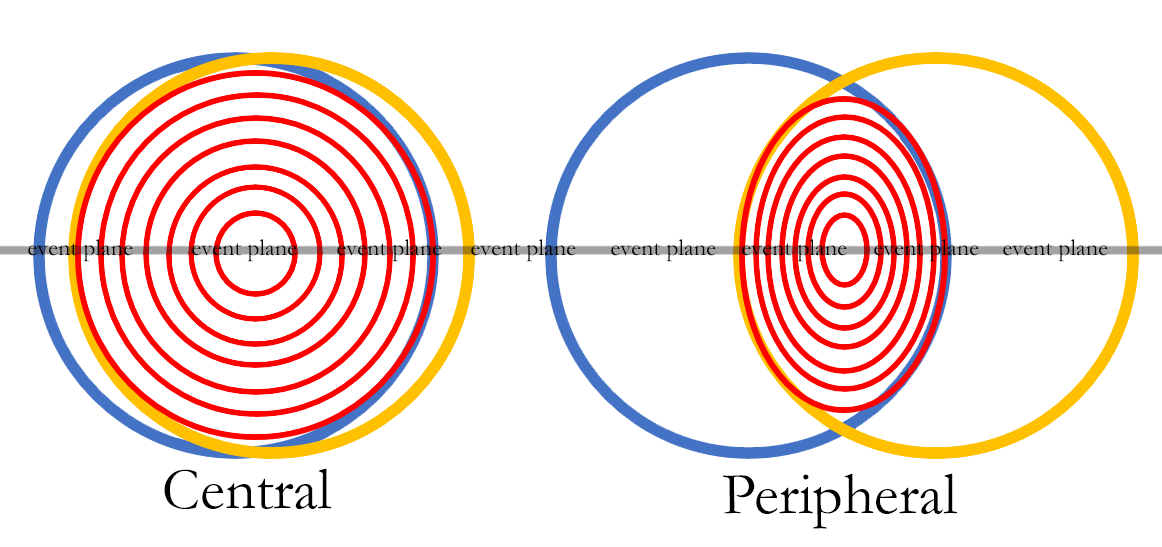
<style>
.page{position:relative;width:1162px;height:547px;background:#ffffff}
.page>*{position:absolute;margin:0}
.t1{font:24px "Garamond";color:#000000}
.t2{font:60px "Garamond";color:#000000}
</style>
<div class="page">
<p class="t1" style="left:28px;top:239px;width:105px;height:23px">event plane</p>
<p class="t1" style="left:192px;top:239px;width:105px;height:23px">event plane</p>
<p class="t1" style="left:337px;top:239px;width:105px;height:23px">event plane</p>
<p class="t1" style="left:471px;top:239px;width:105px;height:23px">event plane</p>
<p class="t1" style="left:611px;top:239px;width:105px;height:23px">event plane</p>
<p class="t1" style="left:742px;top:239px;width:105px;height:23px">event plane</p>
<p class="t1" style="left:874px;top:239px;width:105px;height:23px">event plane</p>
<p class="t1" style="left:1003px;top:239px;width:105px;height:23px">event plane</p>
<p class="t2" style="left:164px;top:468px;width:168px;height:41px">Central</p>
<p class="t2" style="left:722px;top:473px;width:235px;height:56px">Peripheral</p>
</div>
